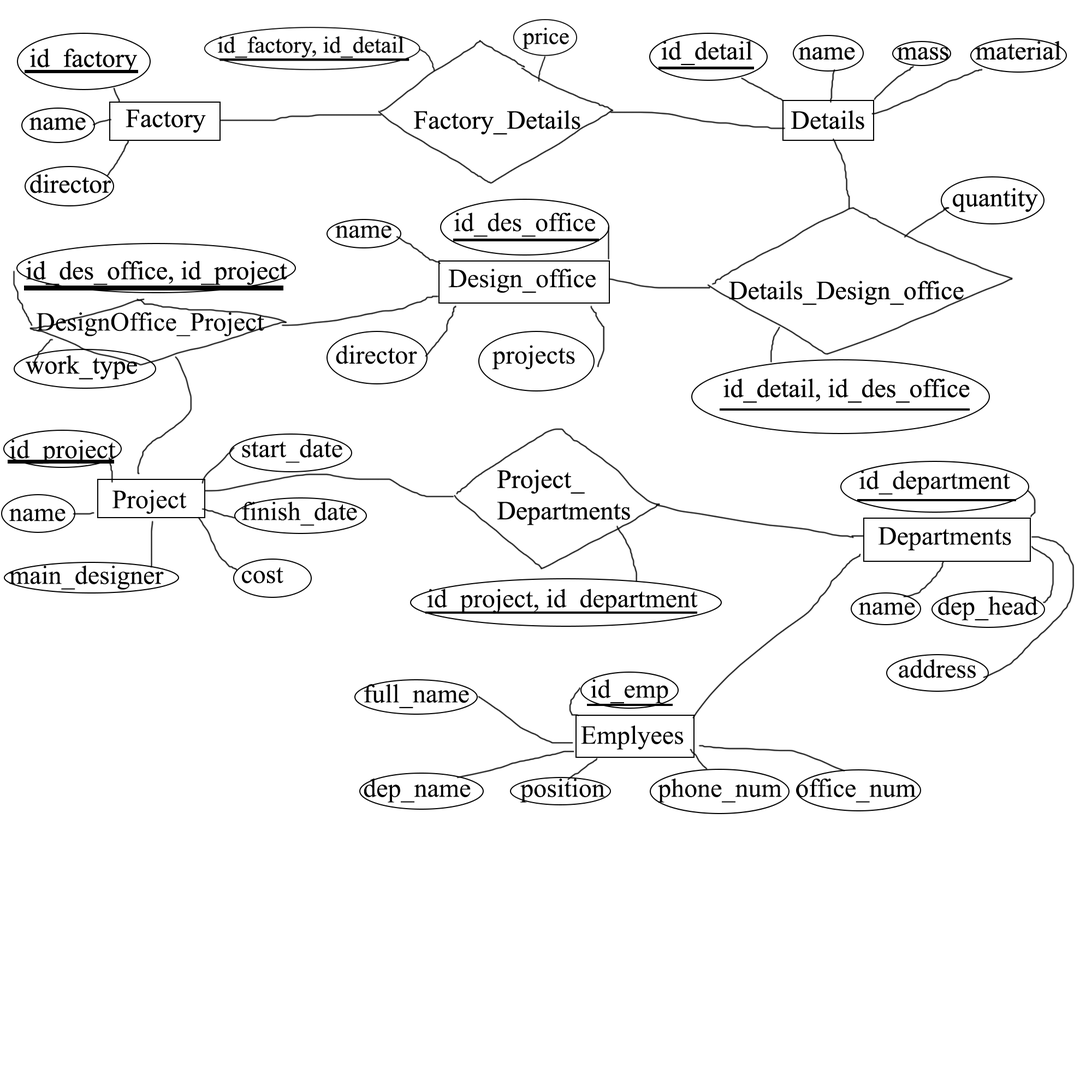
<style>
.page{position:relative;width:1092px;height:1092px;background:#ffffff}
.page>*{position:absolute;margin:0}
.t1{font:26.2px "TimesNewRomanPSMT";color:#000000}
</style>
<div class="page">
<p class="t1" style="left:454px;top:212px;width:141px;height:25px">id_des_office</p>
<p class="t1" style="left:335px;top:225px;width:240px;height:145px">name<br><br><br><br>director    projects</p>
<p class="t1" style="left:448px;top:269px;width:148px;height:24px">Design_office</p>
<p class="t1" style="left:36px;top:312px;width:228px;height:24px">DesignOffice_Project</p>
<p class="t1" style="left:9px;top:440px;width:155px;height:150px">id_project<br><br>name<br><br>main_designer</p>
<p class="t1" style="left:242px;top:438px;width:115px;height:146px">start_date<br><br>finish_date<br><br>cost</p>
<p class="t1" style="left:858px;top:470px;width:180px;height:208px">id_department<br><br><br><br>name  dep_head<br><br>  address</p>
<p class="t1" style="left:112px;top:490px;width:75px;height:24px">Project</p>
<p class="t1" style="left:878px;top:527px;width:133px;height:23px">Departments</p>
<p class="t1" style="left:427px;top:589px;width:271px;height:24px">id_project, id_department</p>
<p class="t1" style="left:364px;top:684px;width:552px;height:119px">full_name<br><br><br>dep_name   position   phone_num office_num</p>
<p class="t1" style="left:591px;top:679px;width:77px;height:25px">id_emp</p>
<p class="t1" style="left:581px;top:725px;width:103px;height:25px">Emplyees</p>
</div>
